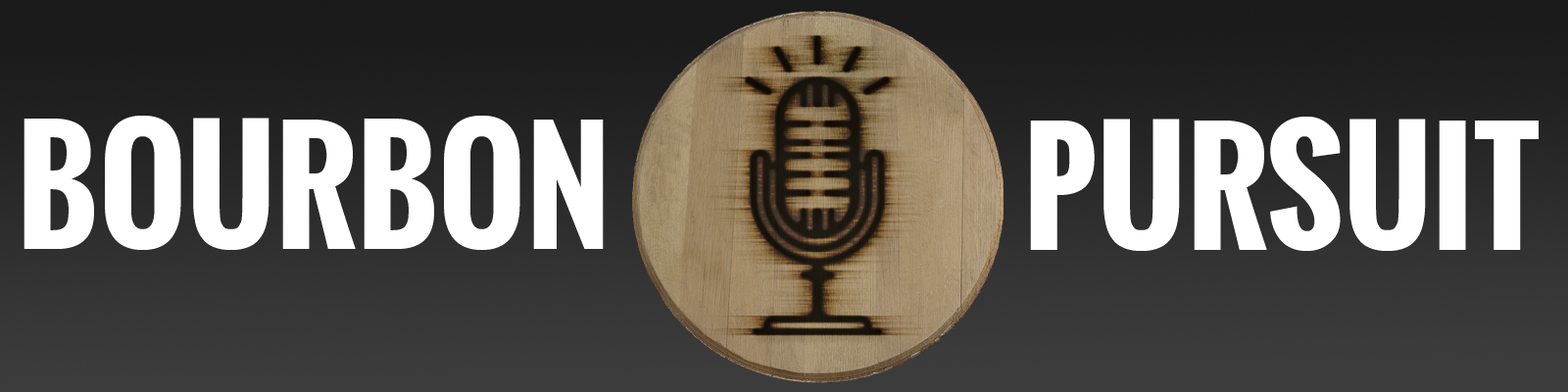
<style>
.page{position:relative;width:1568px;height:392px}
.page>*{position:absolute;margin:0}
.t1{font:147px "Oswald-Bold";color:#ffffff}
</style>
<div class="page">
<p class="t1" style="left:24px;top:116px;width:580px;height:134px">BOURBON</p>
<p class="t1" style="left:1030px;top:117px;width:509px;height:134px">PURSUIT</p>
</div>
